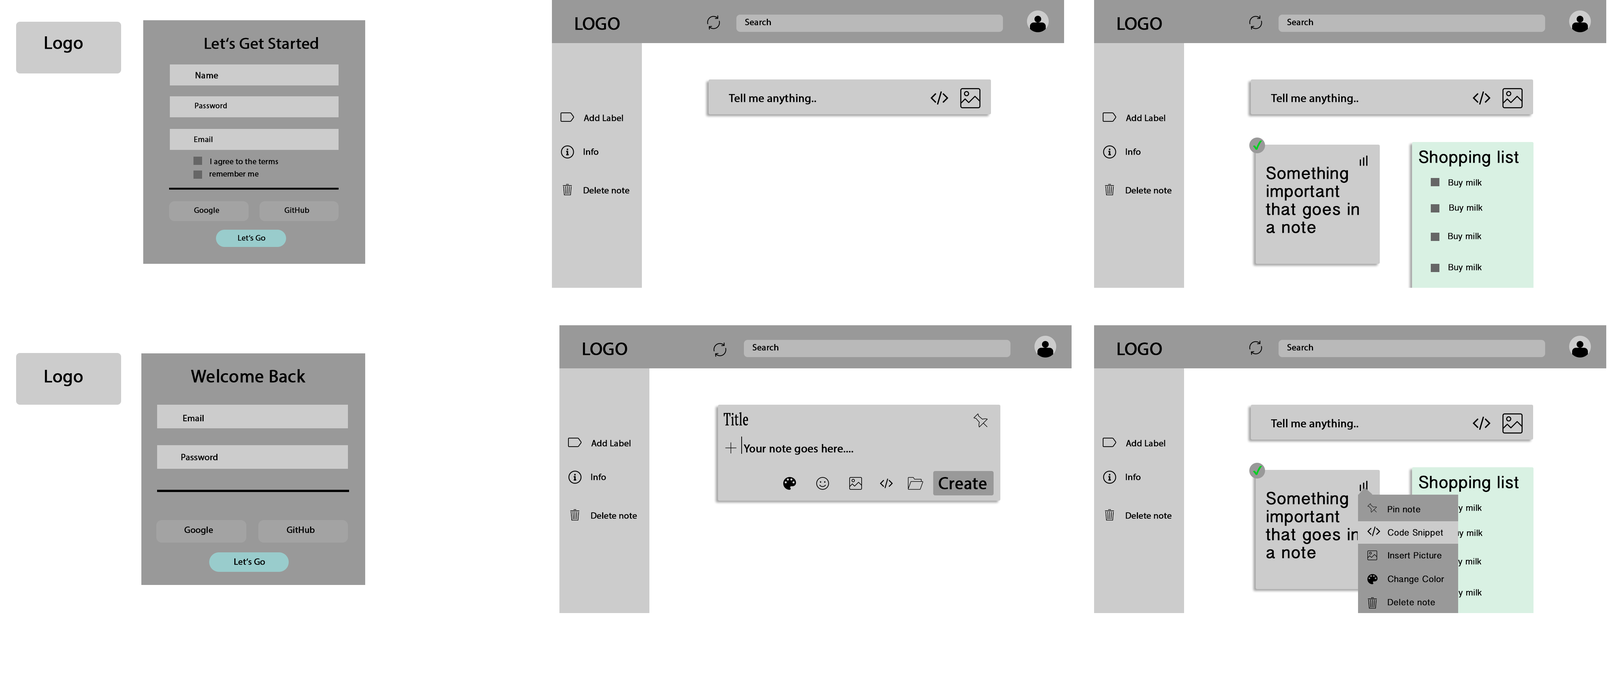
<style>
.page{position:relative;width:1616px;height:688px;background:#ffffff}
.page>*{position:absolute;margin:0}
.t1{font:18px "MyriadPro-Regular";color:#000000;font-weight:bold}
.t2{font:9px "MyriadPro-Regular";color:#000000;font-weight:bold}
.t3{font:15.9px "MyriadPro-Regular";color:#000000;font-weight:bold}
.t4{font:11.2px "MyriadPro-Regular";color:#000000;font-weight:bold}
.t5{font:8px "MyriadPro-Regular";color:#000000;font-weight:bold}
.t6{font:17.2px "LaoSangamMN";color:#000000;font-weight:bold}
.t7{font:17.2px/18px "LaoSangamMN";color:#000000;font-weight:bold}
.t8{font:9px "LaoSangamMN";color:#000000;font-weight:bold}
.t9{font:17.2px "PTSerif-Regular";color:#000000;font-weight:bold;scale:0.65 1}
.t10{font:17.2px "MyriadPro-Regular";color:#000000;font-weight:bold}
</style>
<div class="page">
<p class="t1" style="left:575px;top:17px;width:45px;height:13px">LOGO</p>
<p class="t1" style="left:1118px;top:17px;width:44px;height:13px">LOGO</p>
<p class="t2" style="left:745px;top:19px;width:26px;height:7px">Search</p>
<p class="t2" style="left:1287px;top:19px;width:26px;height:7px">Search</p>
<p class="t1" style="left:45px;top:36px;width:38px;height:17px">Logo</p>
<p class="t3" style="left:205px;top:37px;width:113px;height:12px">Let‘s Get Started</p>
<p class="t2" style="left:195px;top:72px;width:23px;height:7px">Name</p>
<p class="t4" style="left:729px;top:94px;width:87px;height:11px">Tell me anything..</p>
<p class="t4" style="left:1271px;top:94px;width:88px;height:11px">Tell me anything..</p>
<p class="t5" style="left:195px;top:103px;width:32px;height:6px">Password</p>
<p class="t2" style="left:584px;top:115px;width:39px;height:7px">Add Label</p>
<p class="t2" style="left:1126px;top:115px;width:40px;height:7px">Add Label</p>
<p class="t5" style="left:194px;top:136px;width:19px;height:6px">Email</p>
<p class="t2" style="left:584px;top:148px;width:14px;height:7px">Info</p>
<p class="t2" style="left:1126px;top:148px;width:15px;height:7px">Info</p>
<p class="t5" style="left:210px;top:159px;width:68px;height:7px">I agree to the terms</p>
<p class="t6" style="left:1419px;top:150px;width:100px;height:17px">Shopping list</p>
<p class="t5" style="left:209px;top:171px;width:50px;height:6px">remember me</p>
<p class="t7" style="left:1266px;top:166px;width:93px;height:68px">Something important that goes in a note</p>
<p class="t8" style="left:1449px;top:179px;width:33px;height:9px">Buy milk</p>
<p class="t2" style="left:584px;top:187px;width:46px;height:7px">Delete note</p>
<p class="t2" style="left:1126px;top:187px;width:46px;height:7px">Delete note</p>
<p class="t5" style="left:194px;top:207px;width:25px;height:8px">Google</p>
<p class="t5" style="left:285px;top:207px;width:24px;height:6px">GitHub</p>
<p class="t8" style="left:1449px;top:204px;width:34px;height:9px">Buy milk</p>
<p class="t8" style="left:1448px;top:233px;width:34px;height:9px">Buy milk</p>
<p class="t5" style="left:238px;top:235px;width:28px;height:6px">Let‘s Go</p>
<p class="t8" style="left:1449px;top:264px;width:33px;height:9px">Buy milk</p>
<p class="t1" style="left:583px;top:343px;width:44px;height:13px">LOGO</p>
<p class="t2" style="left:753px;top:344px;width:25px;height:7px">Search</p>
<p class="t1" style="left:1118px;top:343px;width:44px;height:13px">LOGO</p>
<p class="t2" style="left:1287px;top:344px;width:26px;height:7px">Search</p>
<p class="t1" style="left:45px;top:370px;width:38px;height:17px">Logo</p>
<p class="t1" style="left:191px;top:369px;width:115px;height:14px">Welcome Back</p>
<p class="t9" style="left:724px;top:412px;width:24px;height:14px">Title</p>
<p class="t2" style="left:183px;top:415px;width:21px;height:7px">Email</p>
<p class="t4" style="left:1271px;top:419px;width:88px;height:11px">Tell me anything..</p>
<p class="t2" style="left:591px;top:440px;width:40px;height:7px">Add Label</p>
<p class="t4" style="left:744px;top:444px;width:110px;height:11px">Your note goes here....</p>
<p class="t2" style="left:1126px;top:440px;width:40px;height:7px">Add Label</p>
<p class="t2" style="left:181px;top:454px;width:37px;height:7px">Password</p>
<p class="t2" style="left:591px;top:474px;width:15px;height:7px">Info</p>
<p class="t10" style="left:939px;top:477px;width:48px;height:13px">Create</p>
<p class="t2" style="left:1126px;top:474px;width:15px;height:7px">Info</p>
<p class="t6" style="left:1419px;top:476px;width:100px;height:16px">Shopping list</p>
<p class="t7" style="left:1266px;top:492px;width:93px;height:67px">Something important that goes in a note</p>
<p class="t8" style="left:1388px;top:506px;width:32px;height:7px">Pin note</p>
<p class="t8" style="left:1449px;top:505px;width:33px;height:8px">Buy milk</p>
<p class="t2" style="left:591px;top:513px;width:46px;height:6px">Delete note</p>
<p class="t2" style="left:1126px;top:513px;width:46px;height:6px">Delete note</p>
<p class="t2" style="left:184px;top:527px;width:29px;height:9px">Google</p>
<p class="t2" style="left:287px;top:527px;width:28px;height:7px">GitHub</p>
<p class="t8" style="left:1388px;top:530px;width:55px;height:8px">Code Snippet</p>
<p class="t8" style="left:1449px;top:530px;width:34px;height:8px">Buy milk</p>
<p class="t8" style="left:1388px;top:552px;width:54px;height:7px">Insert Picture</p>
<p class="t2" style="left:234px;top:559px;width:31px;height:7px">Let‘s Go</p>
<p class="t8" style="left:1448px;top:558px;width:34px;height:9px">Buy milk</p>
<p class="t8" style="left:1388px;top:576px;width:56px;height:9px">Change Color</p>
<p class="t8" style="left:1449px;top:590px;width:33px;height:8px">Buy milk</p>
<p class="t8" style="left:1388px;top:599px;width:47px;height:7px">Delete note</p>
</div>
